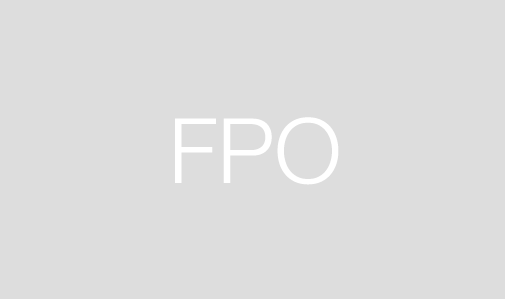
<style>
.page{position:relative;width:505px;height:299px;background:#dddddd}
.page>*{position:absolute;margin:0}
.t1{font:90px "HelveticaNeue-Light";letter-spacing:0.005em;color:#ffffff}
</style>
<div class="page">
<p class="t1" style="left:175px;top:117px;width:164px;height:68px">FPO</p>
</div>
